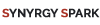
<style>
.page{position:relative;width:100px;height:25px;background:#ffffff}
.page>*{position:absolute;margin:0}
.t1{font:11.5px "Raleway-SemiBold";color:#212226;font-weight:bold}
.t2{font:11.5px "Raleway-SemiBold";color:#a93226;font-weight:bold}
</style>
<div class="page">
<p class="t1" style="left:2px;top:8px;width:98px;height:10px"><span class="t2"> S</span>YNYRGY <span class="t2">S</span>PARK</p>
</div>
